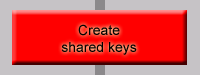
<style>
.page{position:relative;width:200px;height:75px;background:#c6c3c6}
.page>*{position:absolute;margin:0}
.t1{font:14px "ArialMT";color:#000000}
</style>
<div class="page">
<p class="t1" style="left:61px;top:24px;width:76px;height:31px;text-align:center">Create<br>shared keys</p>
</div>
